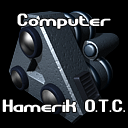
<style>
.page{position:relative;width:128px;height:128px;background:#000000}
.page>*{position:absolute;margin:0}
.t1{font:18px "GravitateBRK";color:#ffffff}
.t2{font:18px "GravitateBRK";letter-spacing:-0.025em;color:#ffffff}
</style>
<div class="page">
<p class="t1" style="left:17px;top:13px;width:94px;height:16px">Computer</p>
<p class="t2" style="left:2px;top:99px;width:123px;height:13px">Hamerik O<span class="t1">.T.C.</span></p>
</div>
